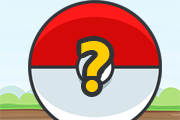
<style>
.page{position:relative;width:180px;height:120px}
.page>*{position:absolute;margin:0}
.t1{font:72px "AbadiMT-CondensedExtraBold";color:#ffcc00}
</style>
<div class="page">
<p class="t1" style="left:81px;top:41px;width:29px;height:51px">?</p>
</div>
